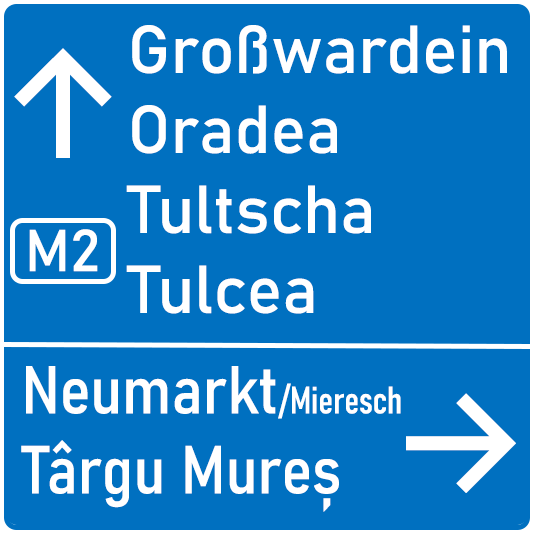
<style>
.page{position:relative;width:533px;height:533px;background:#0070c0}
.page>*{position:absolute;margin:0}
.t1{font:66.7px "Bahnschrift";color:#ffffff}
.t2{font:150px "Inter-Medium";color:#ffffff}
.t3{font:58.3px "Bahnschrift";color:#ffffff}
.t4{font:66.7px "Bahnschrift-SemiCondensed";color:#ffffff}
.t5{font:37.5px "Bahnschrift-SemiCondensed";color:#ffffff}
.t6{font:37.5px "Bahnschrift-Condensed";color:#ffffff}
</style>
<div class="page">
<p class="t1" style="left:126px;top:25px;width:381px;height:289px">Großwardein<br>Oradea<br>Tultscha<br>Tulcea</p>
<p class="t2" style="left:14px;top:48px;width:98px;height:110px">↑</p>
<p class="t3" style="left:29px;top:229px;width:69px;height:43px">M2</p>
<p class="t4" style="left:21px;top:366px;width:380px;height:146px">Neumarkt<span class="t5">/</span><span class="t6">Mieresch</span><br>Târgu Mureș</p>
<p class="t2" style="left:406px;top:393px;width:110px;height:100px">→</p>
</div>
